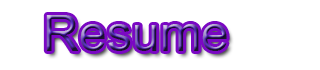
<style>
.page{position:relative;width:320px;height:70px;background:#ffffff}
.page>*{position:absolute;margin:0}
.t1{font:50px "ArialMT"}
</style>
<div class="page">
<p class="t1" style="left:46px;top:15px;width:181px;height:36px">Resume</p>
</div>
